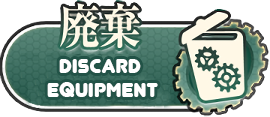
<style>
.page{position:relative;width:270px;height:117px;background:#ffffff}
.page>*{position:absolute;margin:0}
.t1{font:24px/24px "Junegull";color:#ffffff}
</style>
<div class="page">
<p class="t1" style="left:47px;top:59px;width:111px;height:38px;text-align:center">DISCARD <br>EQUIPMENT</p>
</div>
